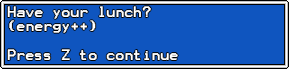
<style>
.page{position:relative;width:289px;height:69px;background:#0f55bf}
.page>*{position:absolute;margin:0}
.t1{font:12px "Terminal";color:#ffffff}
</style>
<div class="page">
<p class="t1" style="left:7px;top:6px;width:171px;height:54px">Have your lunch?<br>(energy++)<br><br>Press Z to continue</p>
</div>
